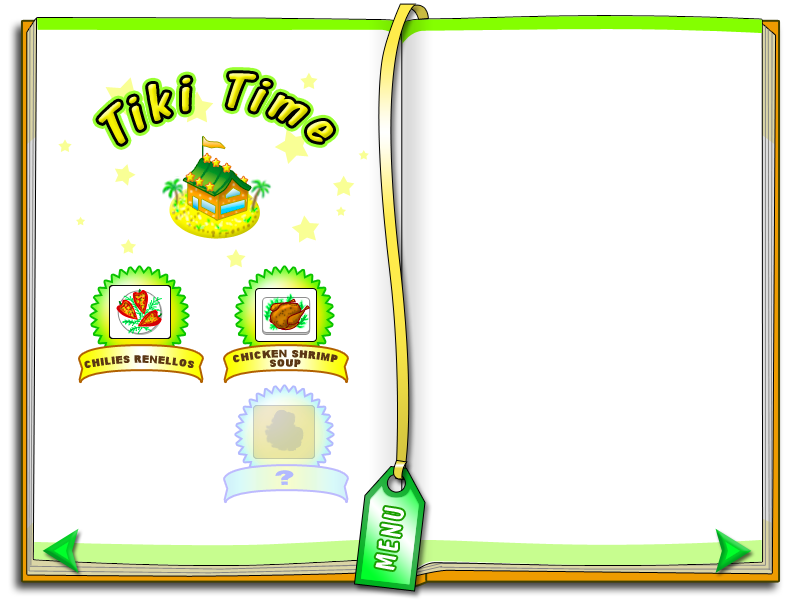
<style>
.page{position:relative;width:800px;height:600px;background:#ffffff}
.page>*{position:absolute;margin:0}
.t1{font:51.8px "DomCasualBT-Regular";letter-spacing:0.095em;font-style:italic}
.t2{font:9.4px/9.4px "Arial-Black";letter-spacing:0.045em;color:#5b3714;text-transform:uppercase}
.t3{font:9.4px "Arial-Black";letter-spacing:0.045em;color:#5b3714;text-transform:uppercase}
.t4{font:18.5px "Arial-Black";letter-spacing:0.045em;color:#b2b9fe;text-transform:uppercase}
.t5{font:28.1px "DomCasualBT-Regular";letter-spacing:0.09em;color:#ffffff;font-variant:small-caps}
</style>
<div class="page">
<p class="t1" style="left:98px;top:73px;width:235px;height:71px;rotate:-1deg">Tiki Time</p>
<p class="t2" style="left:233px;top:349px;width:105px;height:18px;text-align:center">chicken shrimp<br>soup</p>
<p class="t3" style="left:84px;top:355px;width:111px;height:13px">chilies renellos</p>
<p class="t4" style="left:275px;top:470px;width:19px;height:15px">?</p>
<p class="t5" style="left:375px;top:507px;width:29px;height:63px;rotate:-80deg">MENU</p>
</div>
